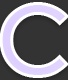
<style>
.page{position:relative;width:68px;height:80px;background:#333333}
.page>*{position:absolute;margin:0}
.t1{font:100px "CenturyGothic-Bold"}
</style>
<div class="page">
<p class="t1" style="left:0px;top:2px;width:70px;height:76px">C</p>
</div>
